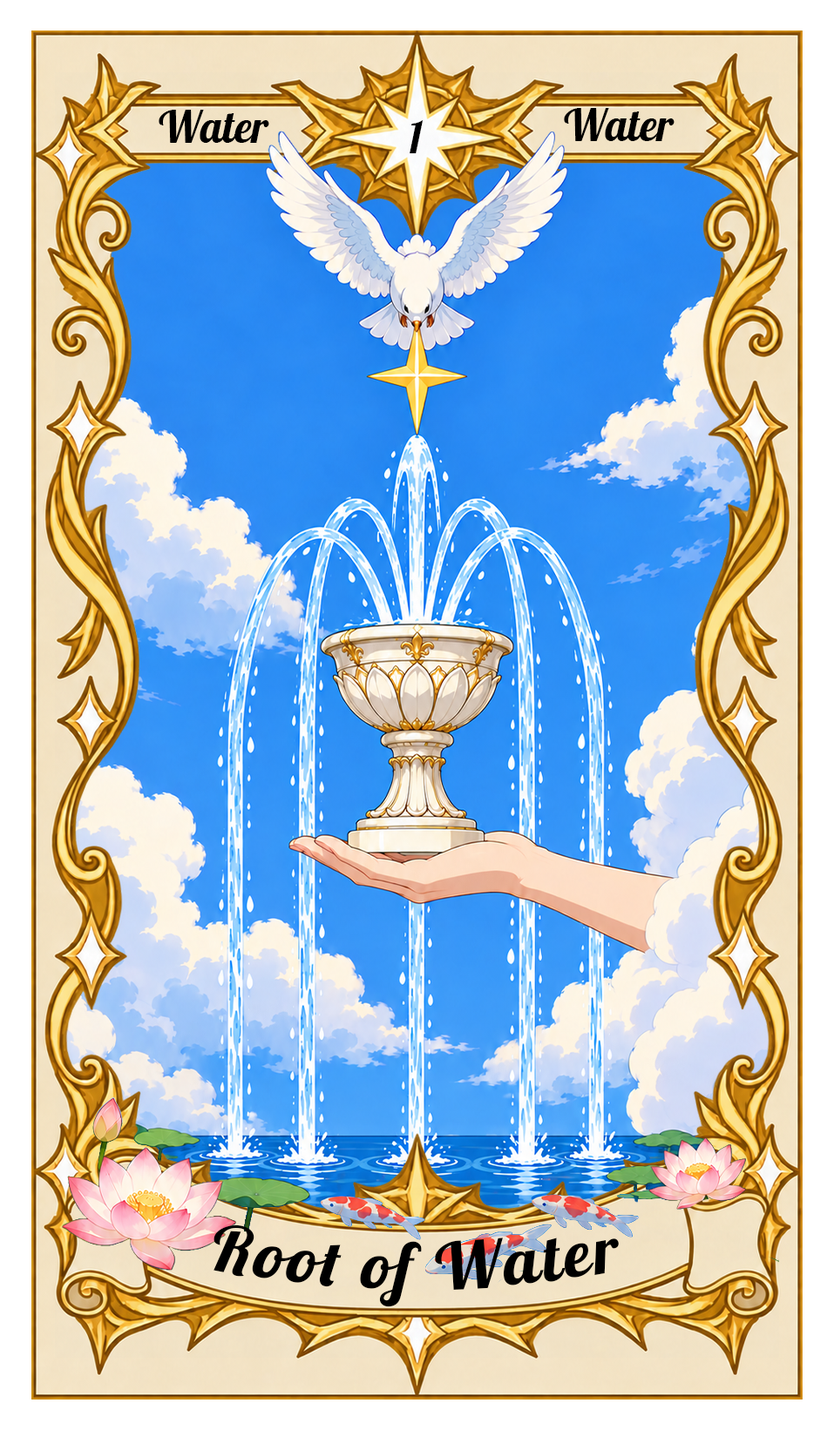
<style>
.page{position:relative;width:834px;height:1430px}
.page>*{position:absolute;margin:0}
.t1{font:43.6px "Lobster-Regular";color:#000000}
.t2{font:65.3px "Lobster-Regular";letter-spacing:0.05em;color:#000000}
</style>
<div class="page">
<p class="t1" style="left:159px;top:110px;width:110px;height:33px">Water</p>
<p class="t1" style="left:564px;top:108px;width:110px;height:33px">Water</p>
<p class="t1" style="left:409px;top:120px;width:14px;height:33px">1</p>
<p class="t2" style="left:213px;top:1225px;width:405px;height:83px">Root of Water</p>
</div>
